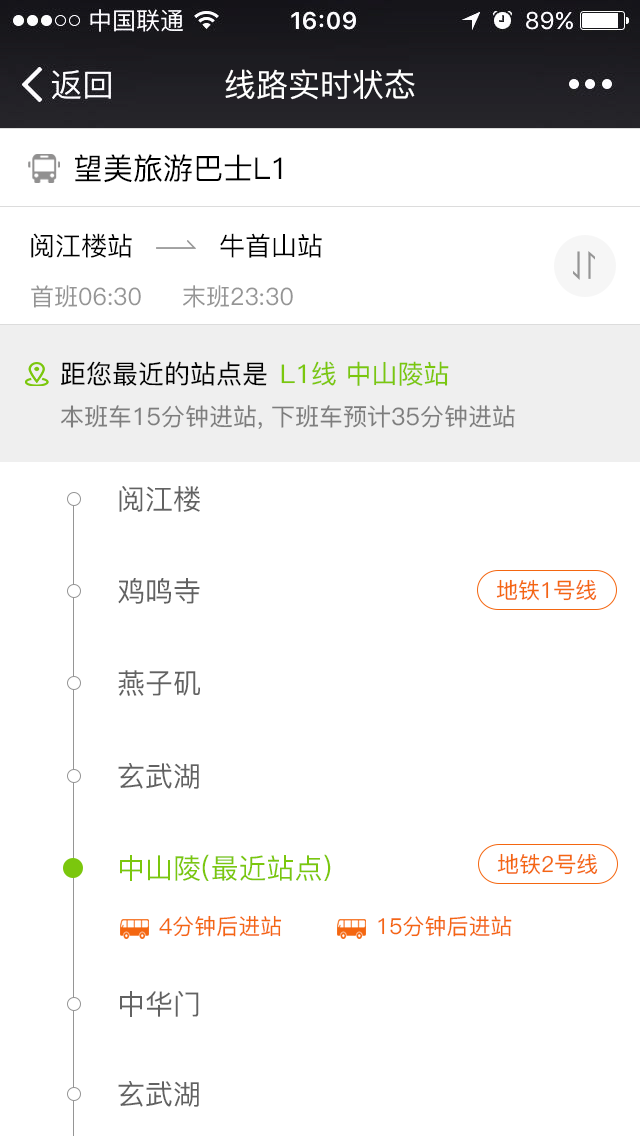
<style>
.page{position:relative;width:640px;height:1136px;background:#ffffff}
.page>*{position:absolute;margin:0}
.t1{font:32px "PingFang-SC-Medium";color:#ffffff}
.t2{font:30px "PingFang-SC-Medium";color:#000000}
.t3{font:26px "PingFang-SC-Medium";color:#000000}
.t4{font:24px "PingFang-SC-Medium";color:#959595}
.t5{font:26px "PingFang-SC-Medium";color:#7bc70d}
.t6{font:24px "PingFang-SC-Medium";color:#7d7d7d}
.t7{font:28px "PingFang-SC-Medium";color:#626262}
.t8{font:22px "PingFang-SC-Medium";color:#f46610}
.t9{font:28px "PingFang-SC-Medium";color:#7bc70d}
</style>
<div class="page">
<p class="t1" style="left:225px;top:69px;width:190px;height:31px">线路实时状态</p>
<p class="t2" style="left:75px;top:154px;width:207px;height:29px">望美旅游巴士L1</p>
<p class="t3" style="left:31px;top:233px;width:101px;height:25px">阅江楼站</p>
<p class="t3" style="left:220px;top:233px;width:102px;height:25px">牛首山站</p>
<p class="t4" style="left:31px;top:285px;width:262px;height:23px">首班06:30     末班23:30</p>
<p class="t3" style="left:61px;top:361px;width:206px;height:25px">距您最近的站点是</p>
<p class="t5" style="left:281px;top:361px;width:168px;height:25px">L1线 中山陵站</p>
<p class="t6" style="left:61px;top:405px;width:454px;height:24px">本班车15分钟进站, 下班车预计35分钟进站</p>
<p class="t7" style="left:119px;top:486px;width:81px;height:26px">阅江楼</p>
<p class="t7" style="left:118px;top:578px;width:82px;height:26px">鸡鸣寺</p>
<p class="t8" style="left:496px;top:579px;width:101px;height:22px">地铁1号线</p>
<p class="t7" style="left:118px;top:670px;width:82px;height:26px">燕子矶</p>
<p class="t7" style="left:118px;top:763px;width:81px;height:26px">玄武湖</p>
<p class="t9" style="left:120px;top:854px;width:211px;height:27px">中山陵(最近站点)</p>
<p class="t8" style="left:497px;top:853px;width:101px;height:22px">地铁2号线</p>
<p class="t8" style="left:159px;top:915px;width:123px;height:22px">4分钟后进站</p>
<p class="t8" style="left:378px;top:915px;width:134px;height:22px">15分钟后进站</p>
<p class="t7" style="left:120px;top:991px;width:79px;height:26px">中华门</p>
<p class="t7" style="left:118px;top:1081px;width:81px;height:26px">玄武湖</p>
</div>
